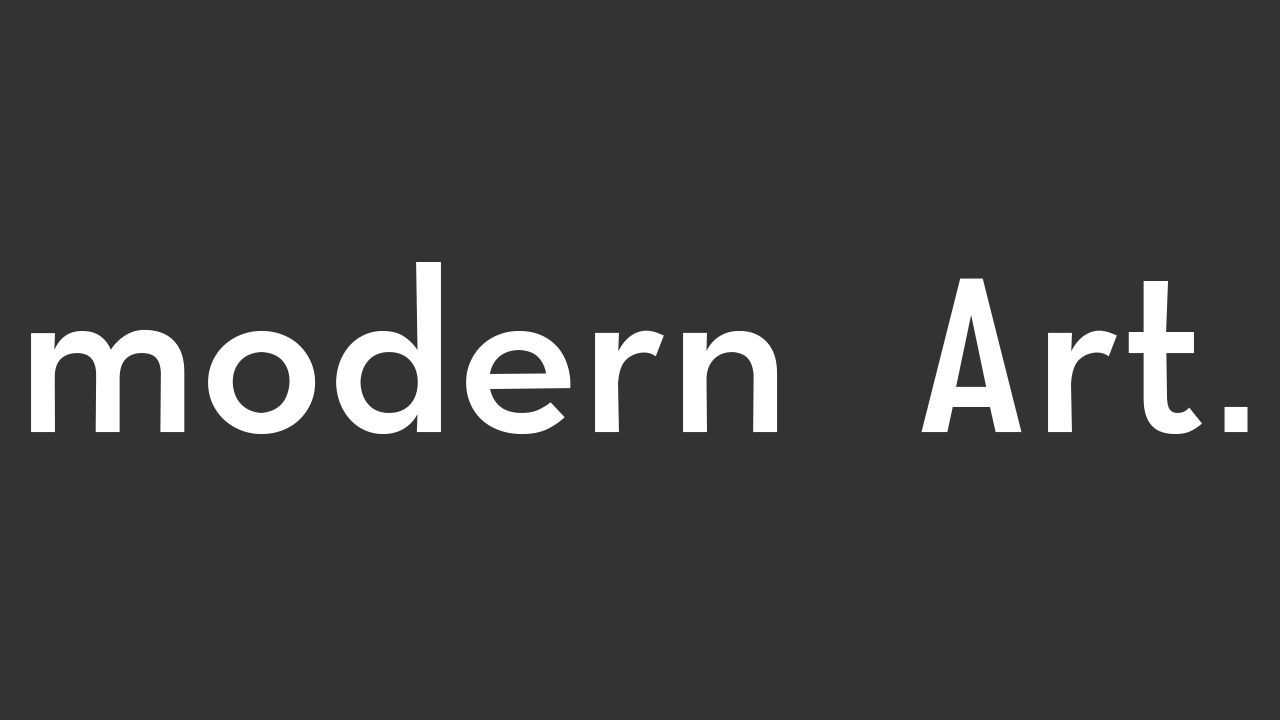
<style>
.page{position:relative;width:1280px;height:720px;background:#333333}
.page>*{position:absolute;margin:0}
.t1{font:236.1px "Modern-M";color:#ffffff}
</style>
<div class="page">
<p class="t1" style="left:31px;top:262px;width:1217px;height:172px">modern Art.</p>
</div>
